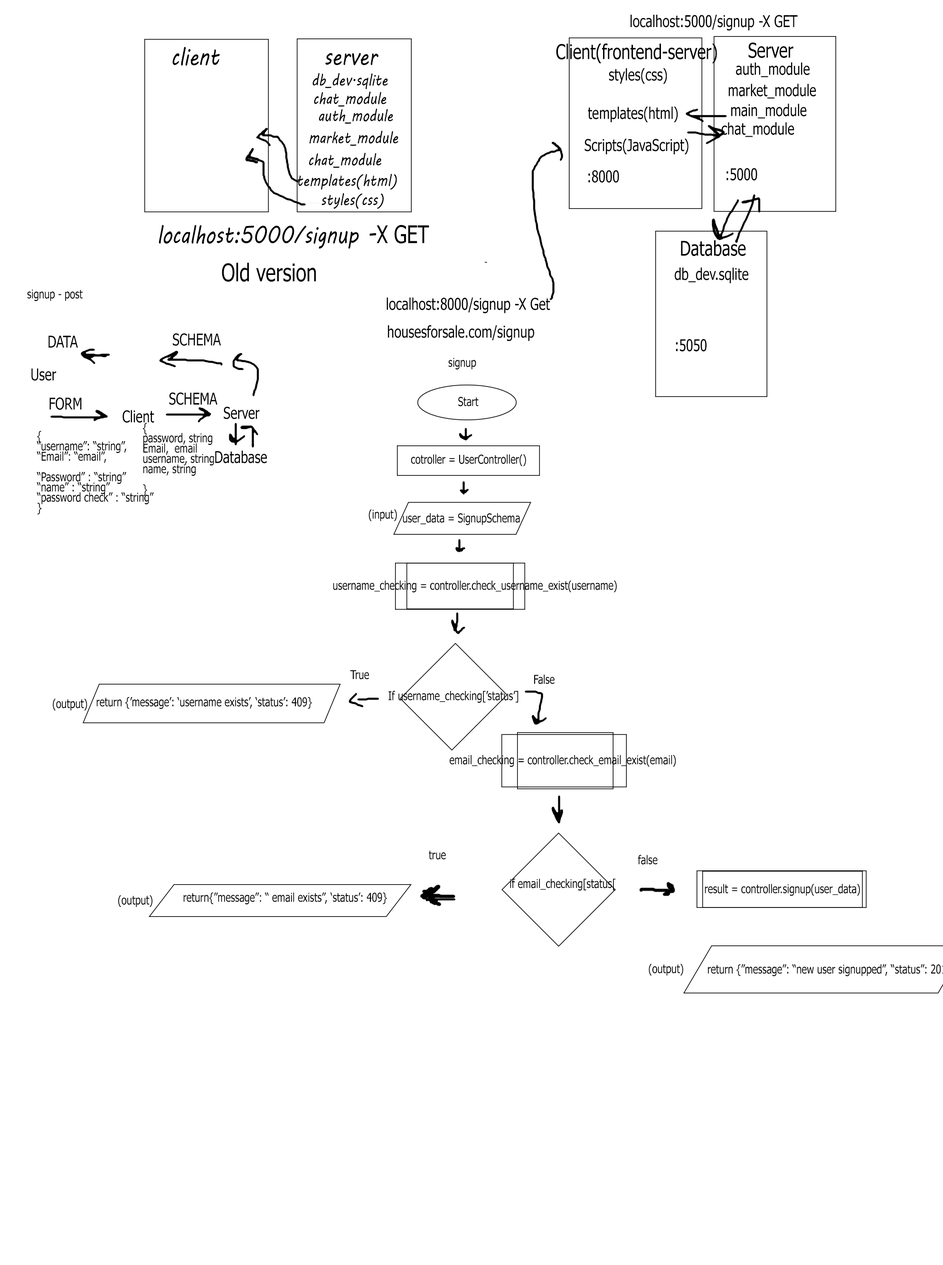
<style>
.page{position:relative;width:943px;height:1265px;background:#ffffff}
.page>*{position:absolute;margin:0}
.t1{font:16.3px "Tahoma";color:#000000;scale:0.79 1}
.t2{font:24.4px "MVBoli";color:#000000;scale:0.79 1}
.t3{font:20.4px "Tahoma";color:#000000;scale:0.79 1}
.t4{font:16.3px "MVBoli";color:#000000;scale:0.79 1}
.t5{font:24.4px "Tahoma";color:#000000;scale:0.79 1}
.t6{font:12.2px "Tahoma";color:#000000;scale:0.79 1}
</style>
<div class="page">
<p class="t1" style="left:630px;top:15px;width:168px;height:16px">localhost:5000/signup -X GET</p>
<p class="t2" style="left:172px;top:47px;width:48px;height:19px">client</p>
<p class="t2" style="left:325px;top:53px;width:53px;height:13px">server</p>
<p class="t3" style="left:556px;top:43px;width:161px;height:21px">Client(frontend-server)</p>
<p class="t3" style="left:748px;top:42px;width:45px;height:16px">Server</p>
<p class="t1" style="left:736px;top:62px;width:73px;height:15px">auth_module</p>
<p class="t4" style="left:312px;top:73px;width:76px;height:16px">db_dev.sqlite</p>
<p class="t1" style="left:609px;top:68px;width:58px;height:16px">styles(css)</p>
<p class="t1" style="left:728px;top:84px;width:88px;height:15px">market_module</p>
<p class="t4" style="left:314px;top:91px;width:72px;height:16px">chat_module</p>
<p class="t4" style="left:319px;top:108px;width:74px;height:16px">auth_module</p>
<p class="t1" style="left:588px;top:106px;width:90px;height:16px">templates(html)</p>
<p class="t1" style="left:731px;top:103px;width:76px;height:16px">main_module</p>
<p class="t1" style="left:721px;top:122px;width:73px;height:15px">chat_module</p>
<p class="t4" style="left:309px;top:131px;width:89px;height:15px">market_module</p>
<p class="t1" style="left:584px;top:139px;width:104px;height:15px">Scripts(JavaScript)</p>
<p class="t4" style="left:309px;top:152px;width:72px;height:16px">chat_module</p>
<p class="t4" style="left:298px;top:174px;width:99px;height:16px">templates(html)</p>
<p class="t1" style="left:588px;top:170px;width:31px;height:13px">:8000</p>
<p class="t1" style="left:726px;top:168px;width:31px;height:12px">:5000</p>
<p class="t4" style="left:321px;top:193px;width:63px;height:16px">styles(css)</p>
<p class="t2" style="left:159px;top:225px;width:270px;height:24px">localhost:5000/signup -<span class="t5">X GET</span></p>
<p class="t3" style="left:681px;top:240px;width:65px;height:16px">Database</p>
<p class="t5" style="left:222px;top:263px;width:94px;height:19px">Old version</p>
<p class="t1" style="left:675px;top:267px;width:73px;height:16px">db_dev.sqlite</p>
<p class="t6" style="left:27px;top:289px;width:56px;height:12px">signup - post</p>
<p class="t1" style="left:386px;top:297px;width:164px;height:16px">localhost:8000/signup -X Get</p>
<p class="t1" style="left:388px;top:325px;width:146px;height:16px">housesforsale.com/signup</p>
<p class="t1" style="left:48px;top:336px;width:30px;height:12px">DATA</p>
<p class="t1" style="left:173px;top:333px;width:48px;height:13px">SCHEMA</p>
<p class="t1" style="left:676px;top:339px;width:30px;height:12px">:5050</p>
<p class="t6" style="left:448px;top:357px;width:28px;height:12px">signup</p>
<p class="t1" style="left:31px;top:368px;width:25px;height:13px">User</p>
<p class="t1" style="left:49px;top:397px;width:33px;height:13px">FORM</p>
<p class="t1" style="left:169px;top:392px;width:48px;height:13px">SCHEMA</p>
<p class="t6" style="left:458px;top:396px;width:21px;height:10px">Start</p>
<p class="t1" style="left:122px;top:410px;width:32px;height:13px">Client</p>
<p class="t1" style="left:224px;top:406px;width:36px;height:13px">Server</p>
<p class="t6" style="left:143px;top:423px;width:71px;height:73px;text-align:right">{<br>password, string<br>Email,  email<br>username, string<br>name, string<br><br>}</p>
<p class="t6" style="left:37px;top:431px;width:117px;height:84px;text-align:right">{<br>“username”: “string”,<br>“Email”: “email”,<br><br>“Password” : “string”<br>“name” : “string”<br>“password check” : “string”<br>}</p>
<p class="t1" style="left:215px;top:451px;width:52px;height:12px">Database</p>
<p class="t6" style="left:411px;top:454px;width:115px;height:12px">cotroller = UserController()</p>
<p class="t6" style="left:368px;top:509px;width:29px;height:12px">(input)</p>
<p class="t6" style="left:403px;top:513px;width:117px;height:12px">user_data = SignupSchema</p>
<p class="t6" style="left:333px;top:580px;width:284px;height:12px">username_checking = controller.check_username_exist(username)</p>
<p class="t6" style="left:350px;top:670px;width:19px;height:9px">True</p>
<p class="t6" style="left:534px;top:674px;width:21px;height:10px">False</p>
<p class="t6" style="left:53px;top:698px;width:34px;height:13px">(output)</p>
<p class="t6" style="left:96px;top:697px;width:216px;height:12px">return {’message’: ‘username exists’, ‘status’: 409}</p>
<p class="t6" style="left:388px;top:690px;width:130px;height:13px">If username_checking[’status’]</p>
<p class="t6" style="left:450px;top:755px;width:226px;height:12px">email_checking = controller.check_email_exist(email)</p>
<p class="t6" style="left:429px;top:850px;width:17px;height:9px">true</p>
<p class="t6" style="left:638px;top:855px;width:20px;height:10px">false</p>
<p class="t6" style="left:510px;top:878px;width:106px;height:13px">if email_checking[status[</p>
<p class="t6" style="left:183px;top:892px;width:204px;height:12px">return{”message”: “ email exists”, ‘status’: 409}</p>
<p class="t6" style="left:705px;top:884px;width:155px;height:12px">result = controller.signup(user_data)</p>
<p class="t6" style="left:118px;top:895px;width:34px;height:12px">(output)</p>
<p class="t6" style="left:649px;top:963px;width:34px;height:13px">(output)</p>
</div>
